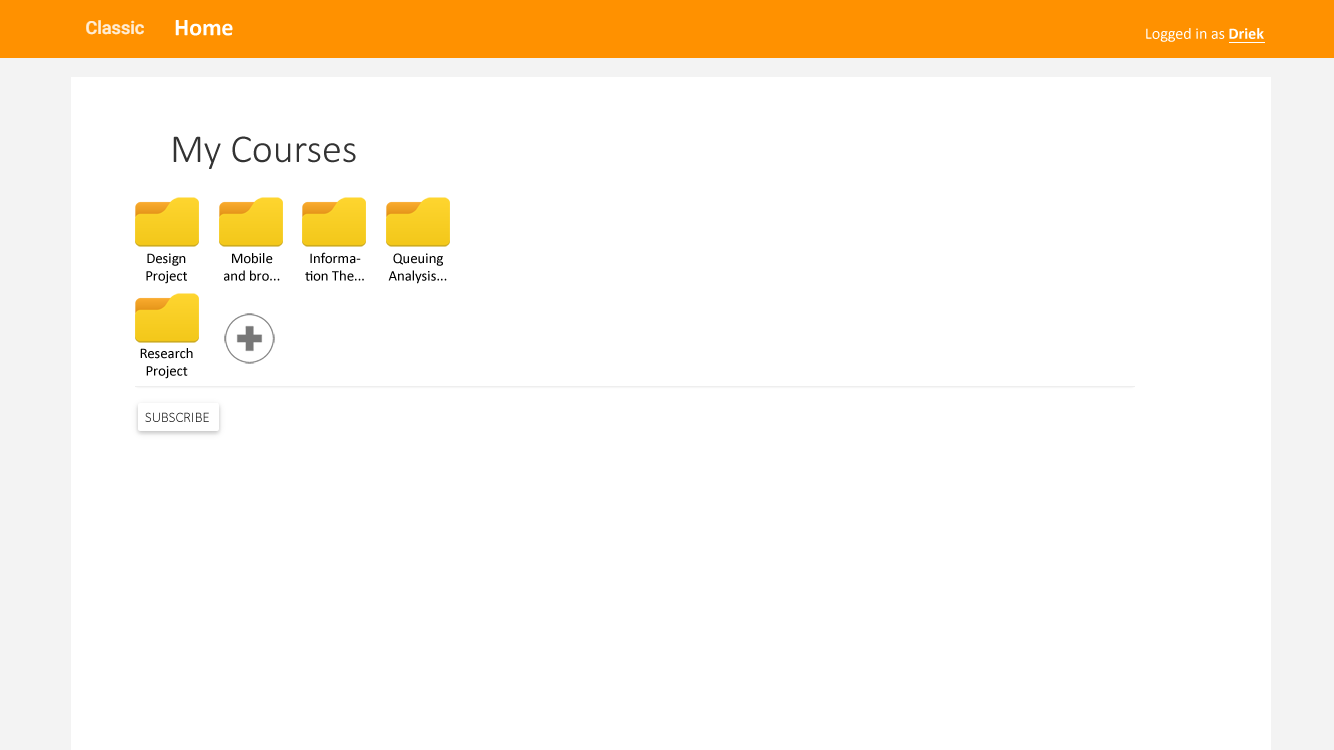
<style>
.page{position:relative;width:1334px;height:750px;background:#ffffff}
.page>*{position:absolute;margin:0}
.t1{font:24px "Calibri-Bold";color:#ffffff}
.t2{font:16px "Calibri";color:#ffffff}
.t3{font:16px "Calibri-Bold";color:#ffffff}
.t4{font:40px "Calibri-Light";color:#333333}
.t5{font:14.7px "Calibri";color:#000000}
.t6{font:14.7px "Calibri-Light";color:#1b1b1b}
</style>
<div class="page">
<p class="t1" style="left:175px;top:20px;width:58px;height:16px">Home</p>
<p class="t2" style="left:1146px;top:28px;width:118px;height:14px">Logged in as <span class="t3">Driek</span></p>
<p class="t4" style="left:173px;top:136px;width:183px;height:33px">My Courses</p>
<p class="t5" style="left:146px;top:253px;width:41px;height:31px;text-align:center">Design Project</p>
<p class="t5" style="left:224px;top:253px;width:56px;height:28px;text-align:center">Mobile and bro...</p>
<p class="t5" style="left:305px;top:252px;width:59px;height:29px;text-align:center">Information The...</p>
<p class="t5" style="left:388px;top:253px;width:59px;height:31px;text-align:center">Queuing Analysis...</p>
<p class="t5" style="left:140px;top:348px;width:53px;height:31px;text-align:center">Research Project</p>
<p class="t6" style="left:145px;top:412px;width:64px;height:10px">SUBSCRIBE</p>
</div>
